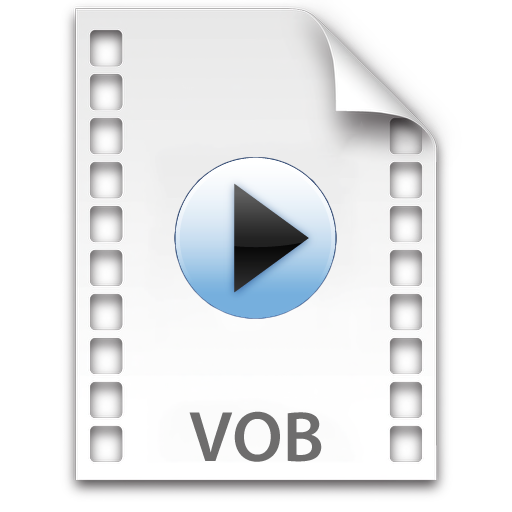
<style>
.page{position:relative;width:512px;height:512px;background:#ffffff}
.page>*{position:absolute;margin:0}
.t1{font:72px "MyriadPro-Semibold";color:#6e6d6d}
</style>
<div class="page">
<p class="t1" style="left:189px;top:411px;width:133px;height:51px">VOB</p>
</div>
